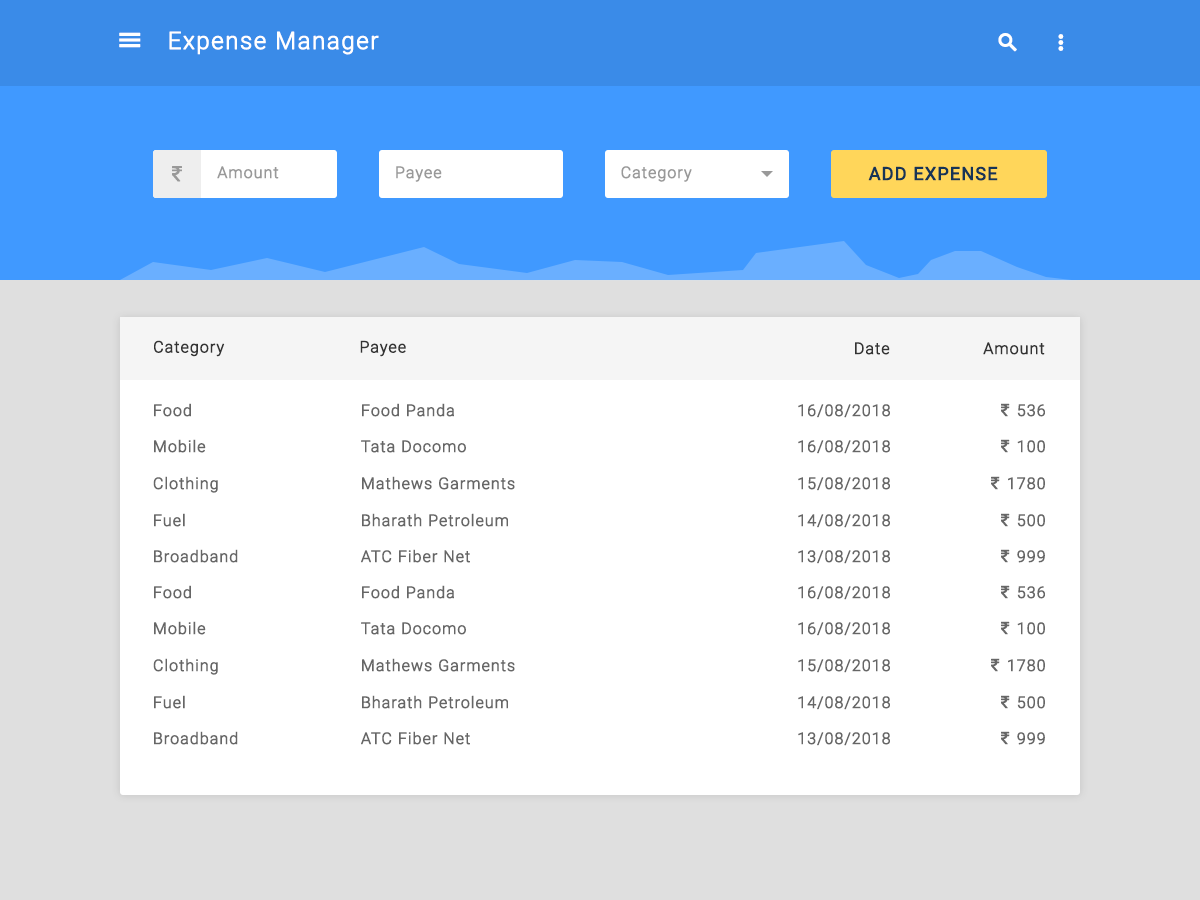
<style>
.page{position:relative;width:1200px;height:900px;background:#ffffff}
.page>*{position:absolute;margin:0}
.t1{font:24px "Roboto-Light";letter-spacing:0.04em;color:#ffffff;font-weight:bold}
.t2{font:22px "MyriadPro-Regular";letter-spacing:0.04em;color:#999999;font-weight:bold}
.t3{font:16px "Roboto-Light";letter-spacing:0.04em;color:#999999;font-weight:bold}
.t4{font:18px "Roboto-Regular";letter-spacing:0.04em;color:#163456;font-weight:bold}
.t5{font:16px "Roboto-Light";letter-spacing:0.04em;color:#333333;font-weight:bold}
.t6{font:16px "Roboto-Light";letter-spacing:0.04em;color:#666666;font-weight:bold}
.t7{font:18px "MyriadPro-Regular";letter-spacing:0.04em;color:#666666;font-weight:bold}
</style>
<div class="page">
<p class="t1" style="left:169px;top:31px;width:210px;height:24px">Expense Manager</p>
<p class="t2" style="left:172px;top:166px;width:10px;height:16px">₹</p>
<p class="t3" style="left:217px;top:166px;width:62px;height:13px">Amount</p>
<p class="t3" style="left:396px;top:166px;width:46px;height:16px">Payee</p>
<p class="t3" style="left:621px;top:166px;width:71px;height:16px">Category</p>
<p class="t4" style="left:868px;top:166px;width:130px;height:15px">ADD EXPENSE</p>
<p class="t5" style="left:154px;top:340px;width:71px;height:17px">Category</p>
<p class="t5" style="left:360px;top:340px;width:46px;height:17px">Payee</p>
<p class="t5" style="left:855px;top:342px;width:35px;height:13px">Date</p>
<p class="t5" style="left:983px;top:342px;width:62px;height:13px">Amount</p>
<p class="t6" style="left:154px;top:403px;width:37px;height:14px">Food</p>
<p class="t6" style="left:362px;top:403px;width:92px;height:14px">Food Panda</p>
<p class="t6" style="left:798px;top:404px;width:92px;height:14px">16/08/2018</p>
<p class="t6" style="left:1001px;top:403px;width:44px;height:14px"><span class="t7">₹ </span>536</p>
<p class="t6" style="left:154px;top:439px;width:52px;height:14px">Mobile</p>
<p class="t6" style="left:361px;top:440px;width:105px;height:13px">Tata Docomo</p>
<p class="t6" style="left:798px;top:440px;width:92px;height:14px">16/08/2018</p>
<p class="t6" style="left:1001px;top:439px;width:44px;height:14px"><span class="t7">₹ </span>100</p>
<p class="t6" style="left:153px;top:476px;width:65px;height:17px">Clothing</p>
<p class="t6" style="left:362px;top:476px;width:153px;height:14px">Mathews Garments</p>
<p class="t6" style="left:798px;top:477px;width:92px;height:14px">15/08/2018</p>
<p class="t6" style="left:991px;top:476px;width:54px;height:14px"><span class="t7">₹ </span>1780</p>
<p class="t6" style="left:154px;top:513px;width:31px;height:14px">Fuel</p>
<p class="t6" style="left:362px;top:513px;width:146px;height:14px">Bharath Petroleum</p>
<p class="t6" style="left:798px;top:514px;width:92px;height:14px">14/08/2018</p>
<p class="t6" style="left:1001px;top:513px;width:44px;height:14px"><span class="t7">₹ </span>500</p>
<p class="t6" style="left:154px;top:549px;width:84px;height:14px">Broadband</p>
<p class="t6" style="left:361px;top:549px;width:109px;height:14px">ATC Fiber Net</p>
<p class="t6" style="left:798px;top:550px;width:92px;height:14px">13/08/2018</p>
<p class="t6" style="left:1001px;top:549px;width:44px;height:14px"><span class="t7">₹ </span>999</p>
<p class="t6" style="left:154px;top:585px;width:37px;height:14px">Food</p>
<p class="t6" style="left:362px;top:585px;width:92px;height:14px">Food Panda</p>
<p class="t6" style="left:798px;top:586px;width:92px;height:14px">16/08/2018</p>
<p class="t6" style="left:1001px;top:585px;width:44px;height:14px"><span class="t7">₹ </span>536</p>
<p class="t6" style="left:154px;top:621px;width:52px;height:14px">Mobile</p>
<p class="t6" style="left:361px;top:622px;width:105px;height:13px">Tata Docomo</p>
<p class="t6" style="left:798px;top:622px;width:92px;height:14px">16/08/2018</p>
<p class="t6" style="left:1001px;top:621px;width:44px;height:14px"><span class="t7">₹ </span>100</p>
<p class="t6" style="left:153px;top:658px;width:65px;height:17px">Clothing</p>
<p class="t6" style="left:362px;top:658px;width:153px;height:14px">Mathews Garments</p>
<p class="t6" style="left:798px;top:659px;width:92px;height:14px">15/08/2018</p>
<p class="t6" style="left:991px;top:658px;width:54px;height:14px"><span class="t7">₹ </span>1780</p>
<p class="t6" style="left:154px;top:695px;width:31px;height:14px">Fuel</p>
<p class="t6" style="left:362px;top:695px;width:146px;height:14px">Bharath Petroleum</p>
<p class="t6" style="left:798px;top:696px;width:92px;height:14px">14/08/2018</p>
<p class="t6" style="left:1001px;top:695px;width:44px;height:14px"><span class="t7">₹ </span>500</p>
<p class="t6" style="left:154px;top:731px;width:84px;height:14px">Broadband</p>
<p class="t6" style="left:361px;top:731px;width:109px;height:14px">ATC Fiber Net</p>
<p class="t6" style="left:798px;top:732px;width:92px;height:14px">13/08/2018</p>
<p class="t6" style="left:1001px;top:731px;width:44px;height:14px"><span class="t7">₹ </span>999</p>
</div>
